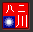
<style>
.page{position:relative;width:33px;height:32px;background:#f20000}
.page>*{position:absolute;margin:0}
.t1{font:10.4px "SimSun";color:#ffffff}
.t2{font:11.7px "SimSun";color:#ffffff}
</style>
<div class="page">
<p class="t1" style="left:6px;top:5px;width:19px;height:8px">八二</p>
<p class="t2" style="left:16px;top:15px;width:11px;height:12px">川</p>
</div>
